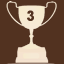
<style>
.page{position:relative;width:64px;height:64px;background:#523220}
.page>*{position:absolute;margin:0}
.t1{font:14px "Arial-BoldMT";color:#523220;text-transform:uppercase;font-weight:bold}
</style>
<div class="page">
<p class="t1" style="left:27px;top:10px;width:7px;height:11px">3</p>
</div>
